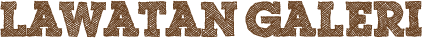
<style>
.page{position:relative;width:422px;height:39px;background:#ffffff}
.page>*{position:absolute;margin:0}
.t1{font:48px "ScribbleBoxDEMO";color:#684121}
</style>
<div class="page">
<p class="t1" style="left:0px;top:0px;width:422px;height:38px">Lawatan Galeri</p>
</div>
